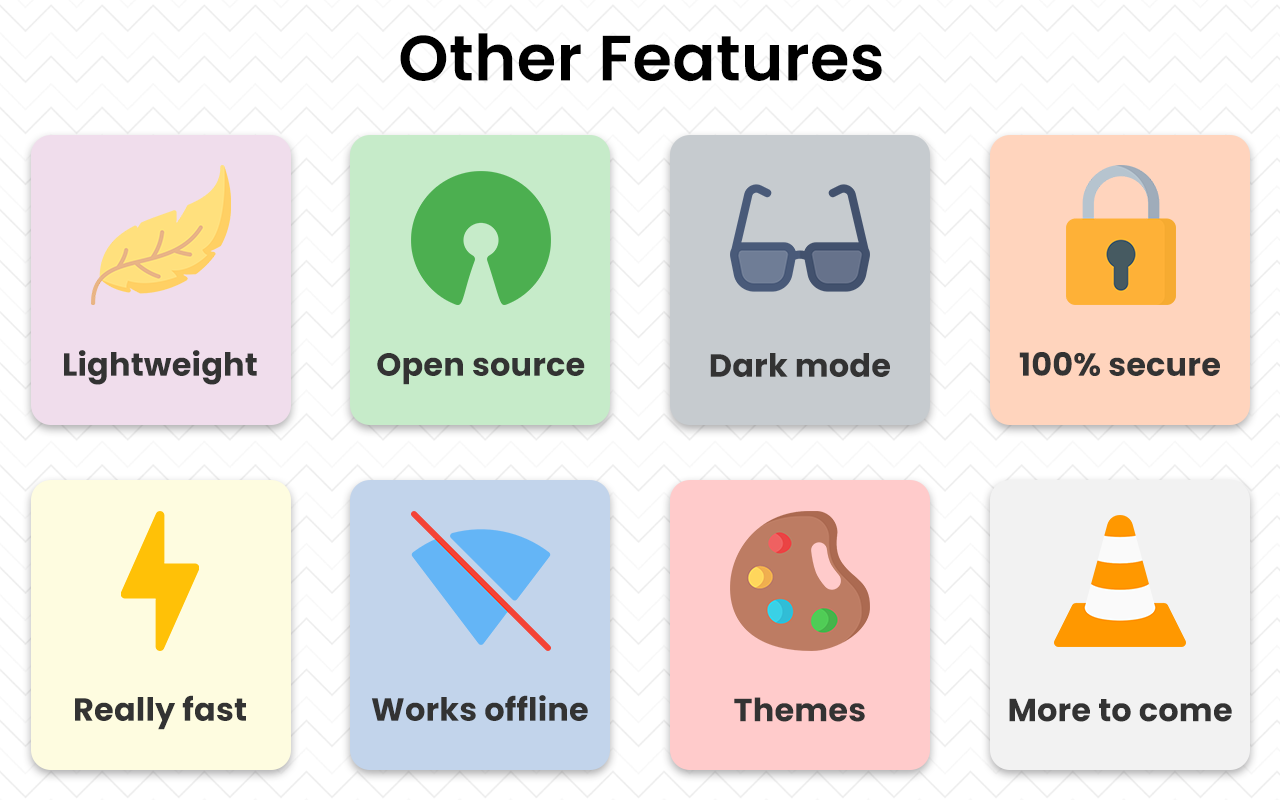
<style>
.page{position:relative;width:1280px;height:800px;background:#ffffff}
.page>*{position:absolute;margin:0}
.t1{font:64px "Poppins-SemiBold";letter-spacing:0.005em;color:#000000}
.t2{font:32px "Poppins-Bold";letter-spacing:0.005em;color:#333333}
</style>
<div class="page">
<p class="t1" style="left:400px;top:33px;width:482px;height:48px">Other Features</p>
<p class="t2" style="left:64px;top:350px;width:193px;height:35px">Lightweight</p>
<p class="t2" style="left:377px;top:353px;width:208px;height:32px">Open source</p>
<p class="t2" style="left:710px;top:353px;width:180px;height:24px">Dark mode</p>
<p class="t2" style="left:1019px;top:352px;width:201px;height:24px">100% secure</p>
<p class="t2" style="left:75px;top:695px;width:171px;height:35px">Really fast</p>
<p class="t2" style="left:371px;top:695px;width:217px;height:26px">Works offline</p>
<p class="t2" style="left:734px;top:697px;width:131px;height:25px">Themes</p>
<p class="t2" style="left:1009px;top:698px;width:223px;height:24px">More to come</p>
</div>
